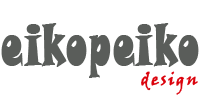
<style>
.page{position:relative;width:200px;height:100px;background:#ffffff}
.page>*{position:absolute;margin:0}
.t1{font:55.6px "SnapITC-Regular";letter-spacing:0.05em;color:#5a5d5a;font-weight:bold;scale:0.6 1}
.t2{font:16.7px "VinerHandITC";letter-spacing:0.1em;color:#db020c;font-weight:bold}
</style>
<div class="page">
<p class="t1" style="left:1px;top:23px;width:198px;height:55px">eikopeiko</p>
<p class="t2" style="left:141px;top:71px;width:57px;height:24px">design</p>
</div>
